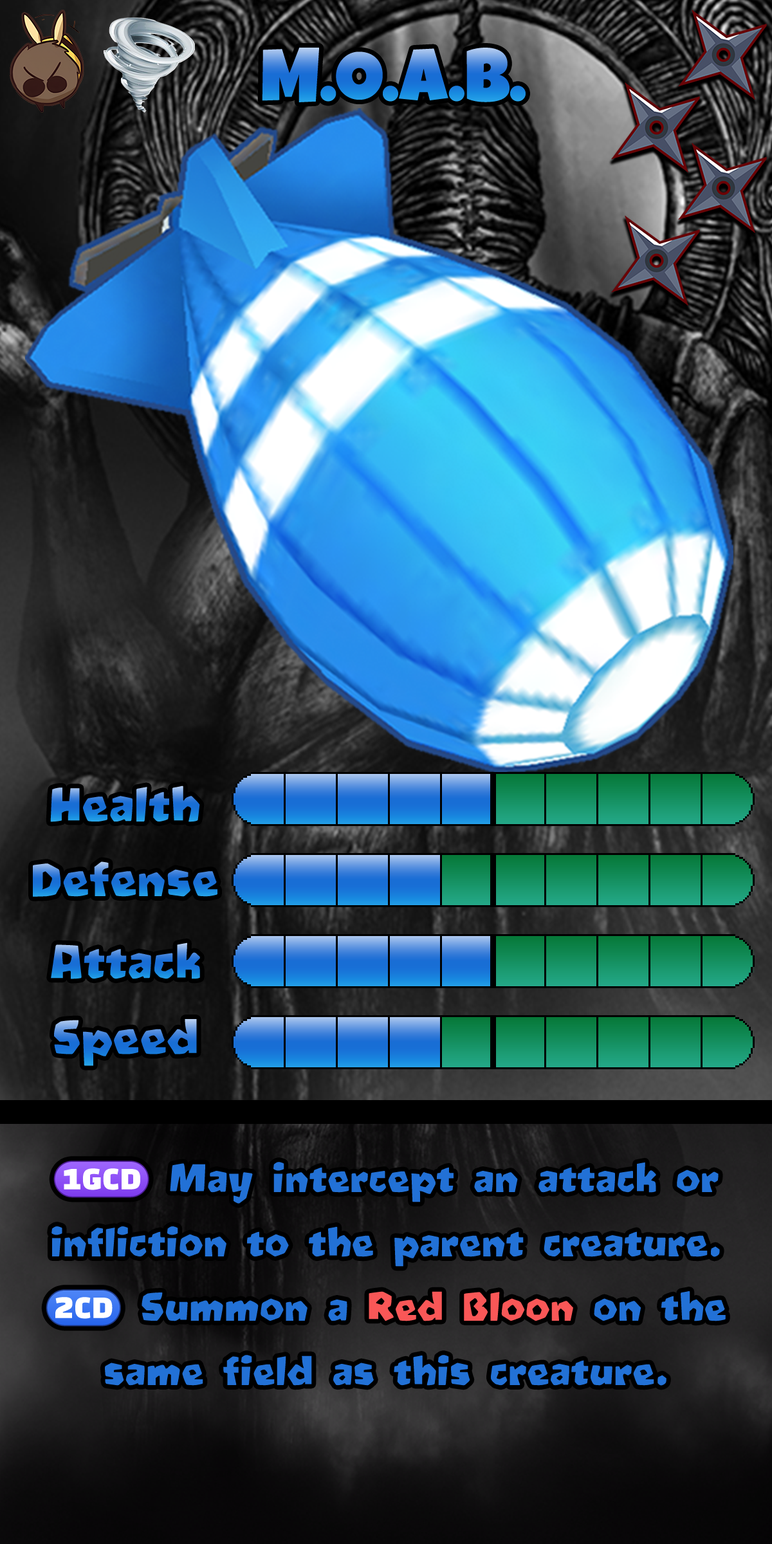
<style>
.page{position:relative;width:772px;height:1544px}
.page>*{position:absolute;margin:0}
.t1{font:128.7px "LuckiestGuy-Regular"}
.t2{font:77.2px "Oetztype"}
.t3{font:64.3px/64.3px "Oetztype";color:#2271d6}
.t4{font:37.5px/64.3px "stoogedings-Regular";color:#2271d6}
.t5{font:64.3px/64.3px "stoogedings-Regular";color:#2271d6}
.t6{font:64.3px/64.3px "Oetztype";color:#f95757}
</style>
<div class="page">
<p class="t1" style="left:262px;top:48px;width:264px;height:54px">M.O.A.B.</p>
<p class="t2" style="left:50px;top:786px;width:150px;height:36px">Health</p>
<p class="t2" style="left:33px;top:862px;width:184px;height:35px">Defense</p>
<p class="t2" style="left:51px;top:943px;width:149px;height:36px">Attack</p>
<p class="t2" style="left:54px;top:1019px;width:143px;height:47px">Speed</p>
<p class="t3" style="left:46px;top:1161px;width:680px;height:225px;text-align:center"><span class="t4">(1GCD)</span> May intercept an attack or infliction to the parent creature.<br><span class="t5">(2CD)</span> Summon a <span class="t6">Red Bloon</span> on the same field as this creature.</p>
</div>
